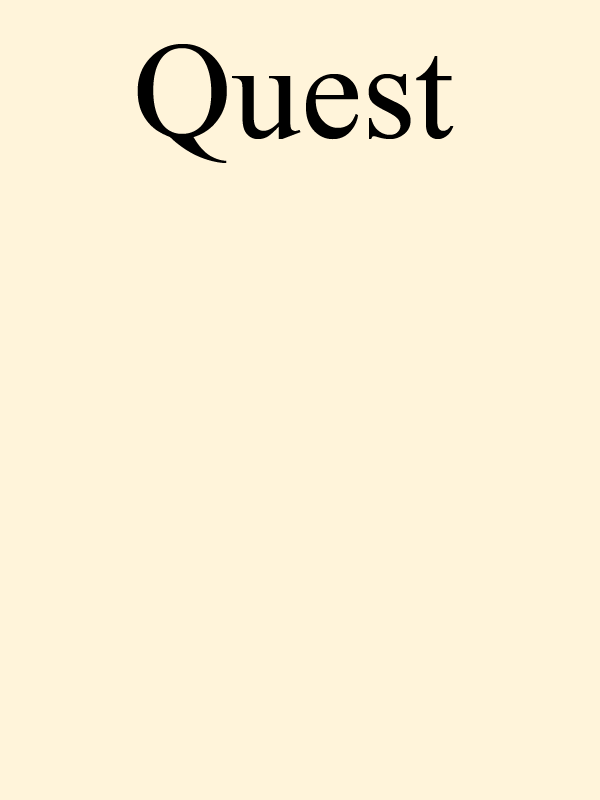
<style>
.page{position:relative;width:600px;height:800px;background:#fff4da}
.page>*{position:absolute;margin:0}
.t1{font:137px "TimesNewRomanPSMT";color:#000000}
</style>
<div class="page">
<p class="t1" style="left:137px;top:44px;width:317px;height:119px">Quest</p>
</div>
